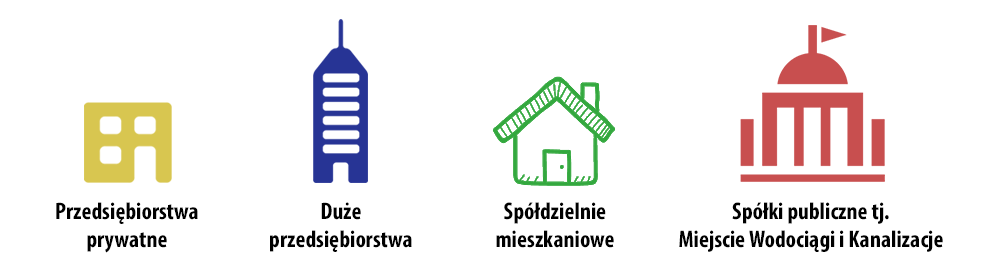
<style>
.page{position:relative;width:1000px;height:279px;background:#ffffff}
.page>*{position:absolute;margin:0}
.t1{font:24px "MyriadPro-BoldCond";color:#000000}
</style>
<div class="page">
<p class="t1" style="left:56px;top:202px;width:142px;height:51px;text-align:center">Przedsiębiorstwa prywatne</p>
<p class="t1" style="left:270px;top:202px;width:142px;height:50px;text-align:center">Duże <br>przedsiębiorstwa</p>
<p class="t1" style="left:496px;top:202px;width:118px;height:46px;text-align:center">Spółdzielnie mieszkaniowe</p>
<p class="t1" style="left:679px;top:202px;width:264px;height:50px;text-align:center">Spółki publiczne tj.<br>Miejscie Wodociągi i Kanalizacje</p>
</div>
